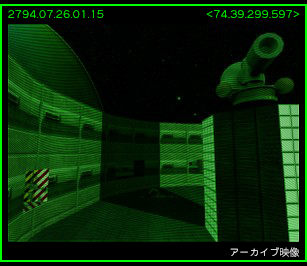
<style>
.page{position:relative;width:307px;height:266px;background:#000000}
.page>*{position:absolute;margin:0}
.t1{font:10px "KikaiChokokuJIS-Md";color:#00ff00}
.t2{font:10px "KikaiChokokuJIS-Md"}
.t3{font:10px "KikaiChokokuJIS-Md";color:#ffffff}
.t4{font:10px "KozGoPr6N-Regular";color:#ffffff}
</style>
<div class="page">
<p class="t1" style="left:8px;top:10px;width:96px;height:8px">2794.07.26.01.15</p>
<p class="t2" style="left:206px;top:10px;width:94px;height:8px">&lt;74.39.299.597&gt;</p>
<p class="t3" style="left:230px;top:247px;width:69px;height:10px">アーカイブ<span class="t4">映像</span></p>
</div>
